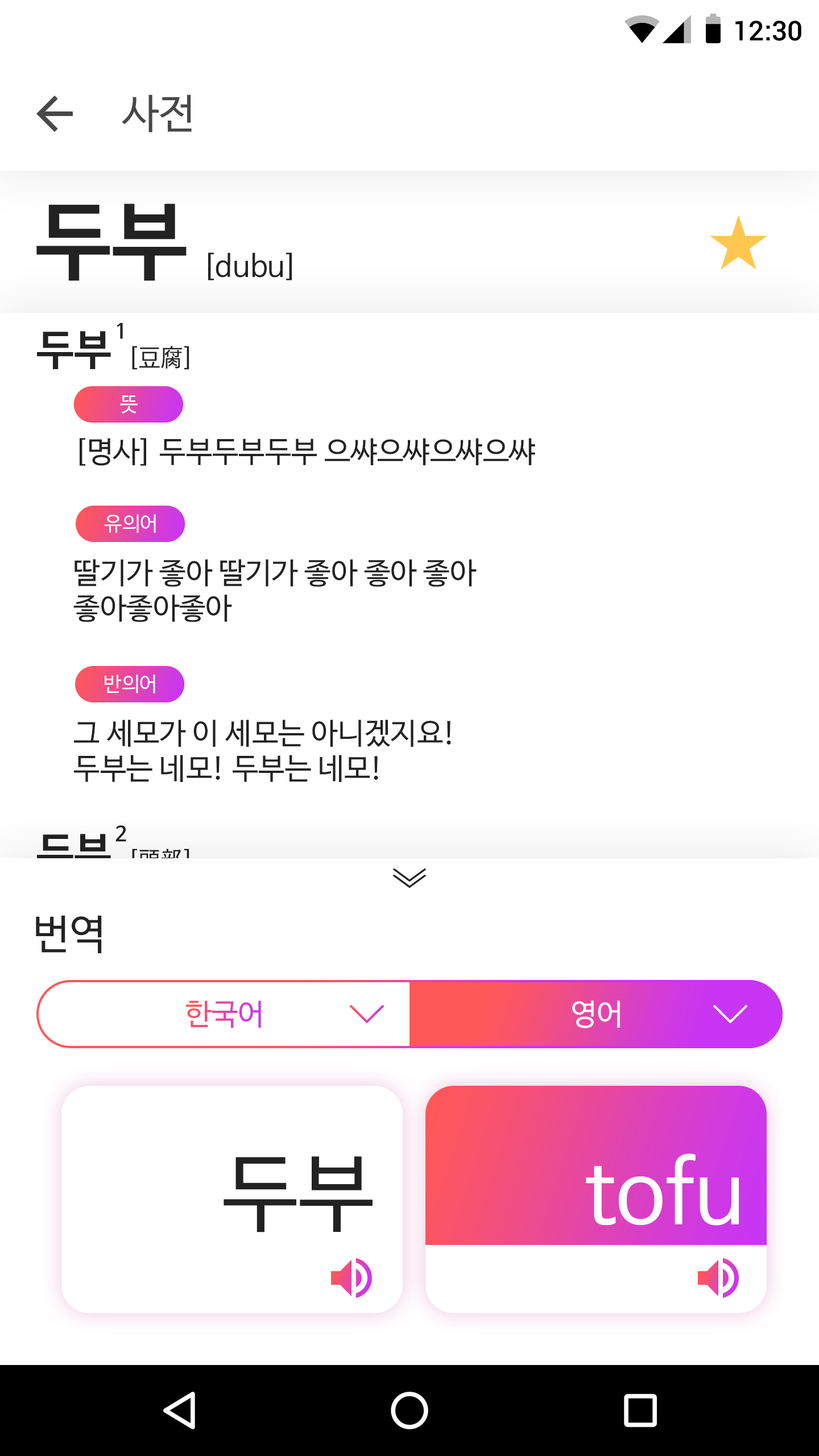
<style>
.page{position:relative;width:819px;height:1456px;background:#ffffff}
.page>*{position:absolute;margin:0}
.t1{font:27.3px "Roboto-Medium";color:#000000}
.t2{font:40.9px "NanumBarunGothic";color:#484848}
.t3{font:85.3px "NanumBarunGothicBold";color:#222222}
.t4{font:29.6px "NanumBarunGothic";color:#222222}
.t5{font:20.5px "NanumBarunGothicBold";color:#222222}
.t6{font:42.1px "NanumBarunGothicBold";color:#222222}
.t7{font:25px "NanumBarunGothic";color:#222222}
.t8{font:20px "NanumBarunGothic";color:#ffffff}
.t9{font:25px "NanumBarunGothic"}
.t10{font:40.9px "NanumBarunGothic";color:#222222}
.t11{font:29.6px "NanumBarunGothic"}
.t12{font:29.6px "NanumBarunGothic";color:#ffffff}
.t13{font:85.3px "NanumBarunGothic";color:#222222}
.t14{font:85.3px "NanumBarunGothic";color:#ffffff}
</style>
<div class="page">
<p class="t1" style="left:735px;top:20px;width:66px;height:21px">12:30</p>
<p class="t2" style="left:122px;top:94px;width:70px;height:39px">사전</p>
<p class="t3" style="left:36px;top:204px;width:151px;height:77px">두부</p>
<p class="t4" style="left:208px;top:253px;width:84px;height:27px">[dubu]</p>
<p class="t5" style="left:117px;top:322px;width:6px;height:17px">1</p>
<p class="t6" style="left:37px;top:331px;width:74px;height:38px">두부</p>
<p class="t7" style="left:132px;top:346px;width:57px;height:24px">[豆腐]</p>
<p class="t8" style="left:120px;top:395px;width:18px;height:18px">뜻</p>
<p class="t4" style="left:80px;top:438px;width:455px;height:28px">[명사] 두부두부두부 으쌰으쌰으쌰으쌰</p>
<p class="t8" style="left:104px;top:514px;width:52px;height:19px">유의어</p>
<p class="t4" style="left:73px;top:559px;width:404px;height:63px">딸기가 좋아 딸기가 좋아 좋아 좋아<br>좋아좋아좋아</p>
<p class="t8" style="left:105px;top:675px;width:50px;height:18px">반의어</p>
<p class="t4" style="left:74px;top:719px;width:377px;height:63px">그 세모가 이 세모는 아니겠지요!<br>두부는 네모! 두부는 네모!</p>
<p class="t6" style="left:37px;top:834px;width:74px;height:38px">두부</p>
<p class="t5" style="left:115px;top:825px;width:11px;height:17px">2</p>
<p class="t9" style="left:132px;top:849px;width:57px;height:23px">[頭部]</p>
<p class="t10" style="left:36px;top:915px;width:66px;height:38px">번역</p>
<p class="t11" style="left:186px;top:1000px;width:75px;height:28px">한국어</p>
<p class="t12" style="left:572px;top:1000px;width:48px;height:28px">영어</p>
<p class="t13" style="left:224px;top:1156px;width:149px;height:76px">두부</p>
<p class="t14" style="left:586px;top:1153px;width:153px;height:73px">tofu</p>
</div>
